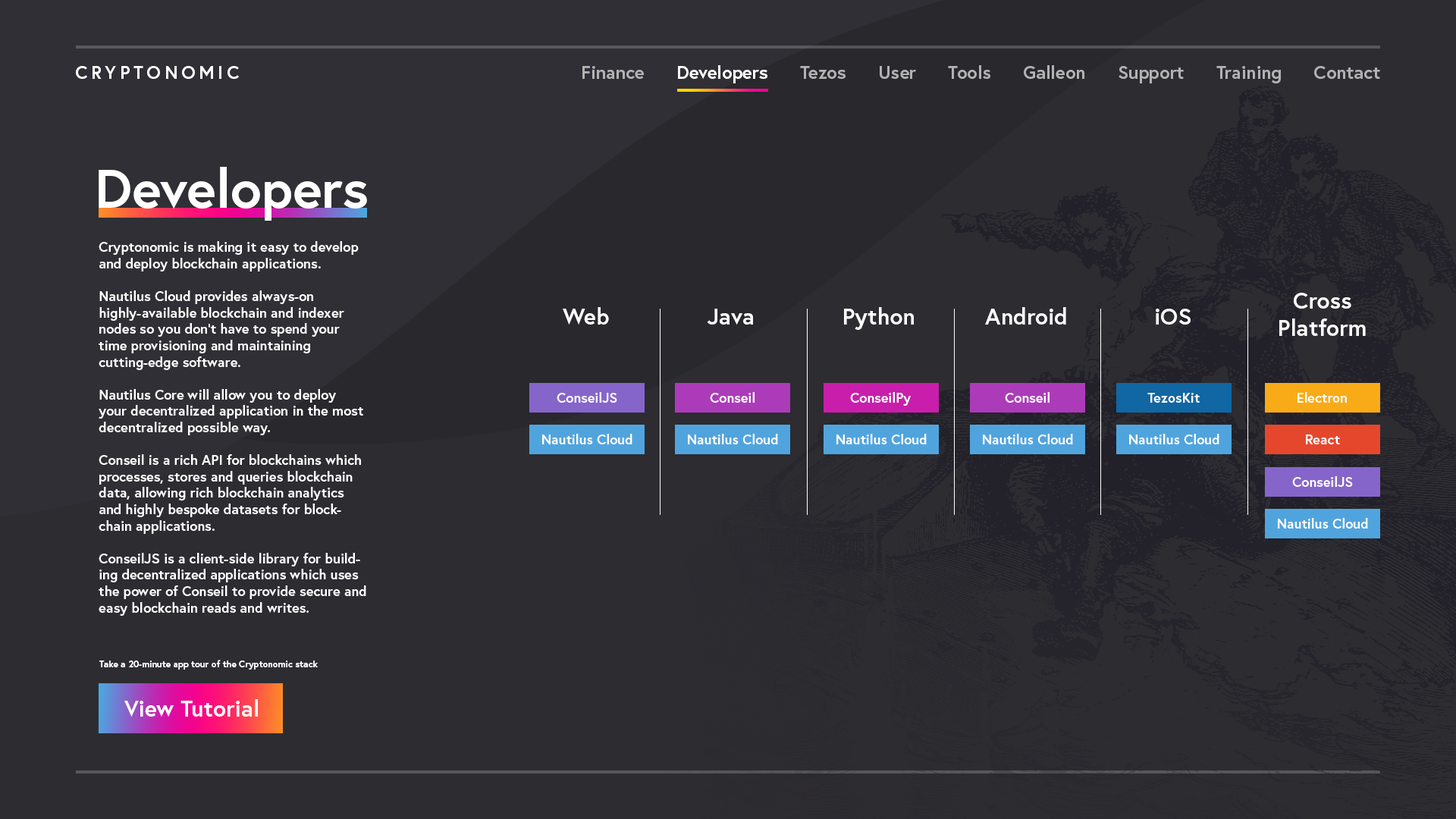
<style>
.page{position:relative;width:1456px;height:819px;background:#2d2c31}
.page>*{position:absolute;margin:0}
.t1{font:18.2px "Europa-Bold";letter-spacing:0.2em;color:#ffffff;text-transform:uppercase}
.t2{font:18.2px "Europa-Bold";color:#b2b2b2}
.t3{font:18.2px "Europa-Bold";color:#ffffff}
.t4{font:54.6px "Europa-Bold";color:#ffffff}
.t5{font:13.6px "Europa-Bold";color:#ffffff}
.t6{font:22.7px "Europa-Bold";color:#ffffff}
.t7{font:9.1px "Europa-Bold";color:#ffffff}
</style>
<div class="page">
<p class="t1" style="left:76px;top:66px;width:163px;height:13px">CryptoNOMIC</p>
<p class="t2" style="left:582px;top:65px;width:798px;height:18px">Finance      <span class="t3">Developers      </span>Tezos      User      Tools      Galleon      Support      Training      Contact</p>
<p class="t4" style="left:99px;top:167px;width:268px;height:54px">Developers</p>
<p class="t5" style="left:99px;top:241px;width:267px;height:375px">Cryptonomic is making it easy to develop and deploy blockchain applications.<br><br>Nautilus Cloud provides always-on <br>highly-available blockchain and indexer nodes so you don’t have to spend your time provisioning and maintaining <br>cutting-edge software.<br><br>Nautilus Core will allow you to deploy your decentralized application in the most decentralized possible way.<br><br>Conseil is a rich API for blockchains which processes, stores and queries blockchain data, allowing rich blockchain analytics and highly bespoke datasets for blockchain applications.<br><br>ConseilJS is a client-side library for building decentralized applications which uses the power of Conseil to provide secure and easy blockchain reads and writes.</p>
<p class="t6" style="left:1279px;top:293px;width:87px;height:43px;text-align:center">Cross<br>Platform</p>
<p class="t6" style="left:563px;top:307px;width:46px;height:18px">Web</p>
<p class="t6" style="left:707px;top:309px;width:46px;height:16px">Java</p>
<p class="t6" style="left:844px;top:307px;width:70px;height:23px">Python</p>
<p class="t6" style="left:985px;top:307px;width:81px;height:18px">Android</p>
<p class="t6" style="left:1156px;top:309px;width:35px;height:16px">iOS</p>
<p class="t5" style="left:557px;top:392px;width:60px;height:11px">ConseilJS</p>
<p class="t5" style="left:710px;top:392px;width:45px;height:11px">Conseil</p>
<p class="t5" style="left:850px;top:392px;width:61px;height:14px">ConseilPy</p>
<p class="t5" style="left:1005px;top:392px;width:45px;height:11px">Conseil</p>
<p class="t5" style="left:1147px;top:393px;width:53px;height:10px">TezosKit</p>
<p class="t5" style="left:1297px;top:392px;width:50px;height:11px">Electron</p>
<p class="t5" style="left:542px;top:434px;width:90px;height:10px">Nautilus Cloud</p>
<p class="t5" style="left:688px;top:434px;width:90px;height:10px">Nautilus Cloud</p>
<p class="t5" style="left:836px;top:434px;width:91px;height:10px">Nautilus Cloud</p>
<p class="t5" style="left:983px;top:434px;width:90px;height:10px">Nautilus Cloud</p>
<p class="t5" style="left:1129px;top:434px;width:90px;height:10px">Nautilus Cloud</p>
<p class="t5" style="left:1306px;top:435px;width:34px;height:9px">React</p>
<p class="t5" style="left:1292px;top:476px;width:61px;height:11px">ConseilJS</p>
<p class="t5" style="left:1278px;top:518px;width:90px;height:11px">Nautilus Cloud</p>
<p class="t7" style="left:99px;top:660px;width:219px;height:10px">Take a 20-minute app tour of the Cryptonomic stack</p>
<p class="t6" style="left:124px;top:699px;width:134px;height:18px">View Tutorial</p>
</div>
